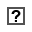
<style>
.page{position:relative;width:32px;height:32px;background:#ffffff}
.page>*{position:absolute;margin:0}
.t1{font:16.9px "Arial-BoldMT";color:#000000}
</style>
<div class="page">
<p class="t1" style="left:11px;top:10px;width:10px;height:12px">?</p>
</div>
